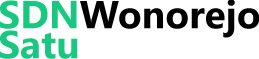
<style>
.page{position:relative;width:259px;height:59px;background:#ffffff}
.page>*{position:absolute;margin:0}
.t1{font:39.1px/30px "SegoeUI-Bold";color:#000000}
.t2{font:39.1px/30px "SegoeUI-Bold";color:#19c880}
</style>
<div class="page">
<p class="t1" style="left:0px;top:0px;width:260px;height:59px"><span class="t2">SDN</span>Wonorejo<br><span class="t2">Satu</span></p>
</div>
